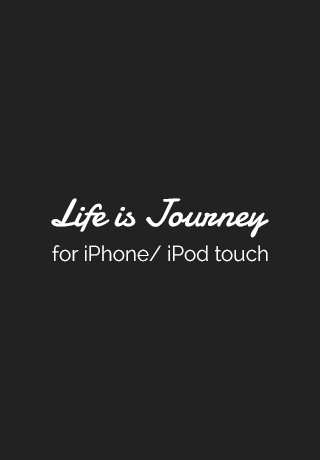
<style>
.page{position:relative;width:320px;height:460px;background:#222222}
.page>*{position:absolute;margin:0}
.t1{font:39.1px "Damion";color:#ffffff}
.t2{font:21.3px "Raleway-Regular";color:#ffffff}
</style>
<div class="page">
<p class="t1" style="left:51px;top:198px;width:218px;height:40px">Life is Journey</p>
<p class="t2" style="left:52px;top:245px;width:216px;height:17px">for iPhone/ iPod touch</p>
</div>
